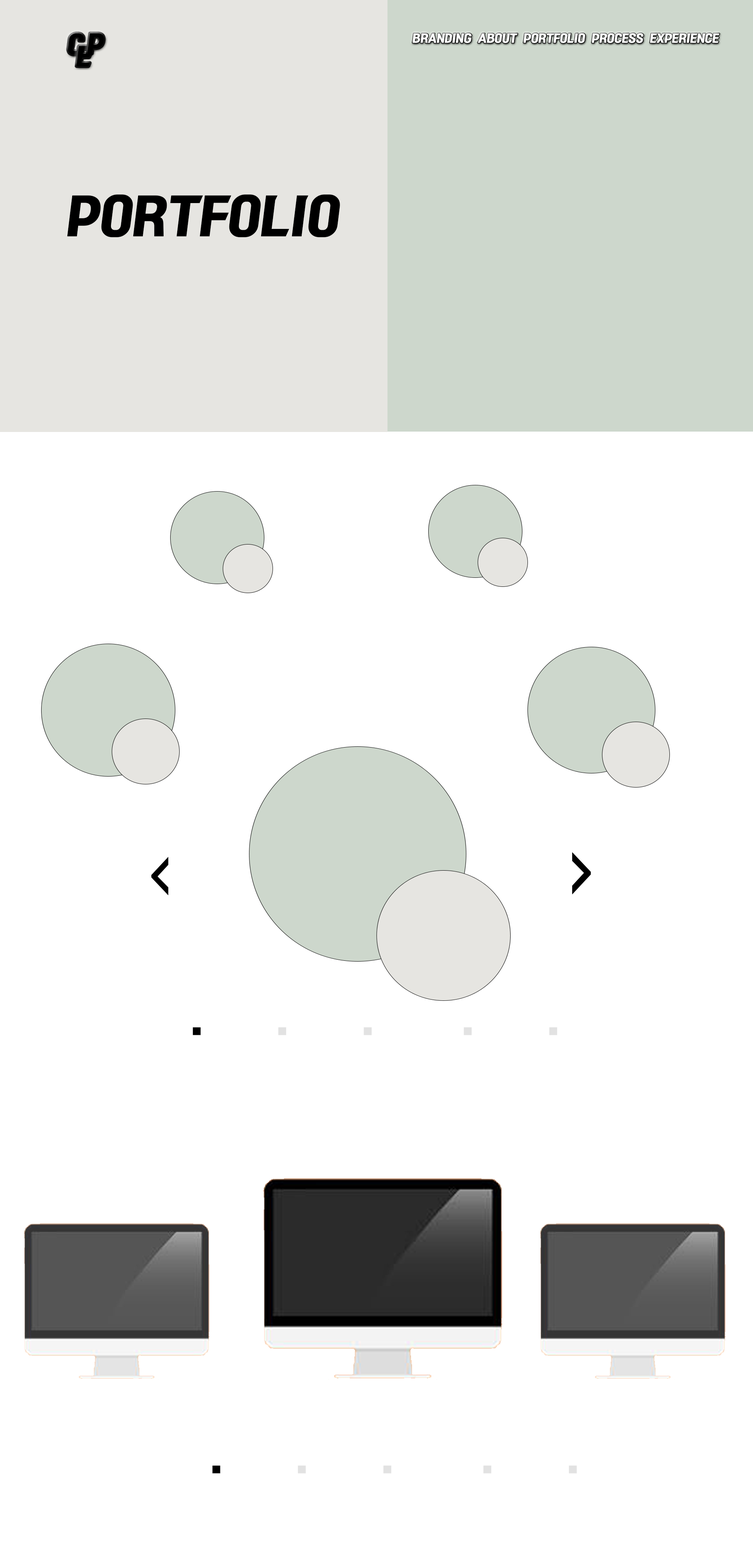
<style>
.page{position:relative;width:753px;height:1568px;background:#ffffff}
.page>*{position:absolute;margin:0}
.t1{font:10.9px "KoreanRKT-R";color:#ffffff}
.t2{font:48.2px "KoreanRKT-R";color:#000000}
.t3{font:43.7px "KoreanSWGI3-R";color:#000000}
.t4{font:48.2px "KoreanSWGI3-R";color:#000000}
.t5{font:48.2px "KoreanSWGI3-R";color:#e2e2e2}
</style>
<div class="page">
<p class="t1" style="left:412px;top:33px;width:307px;height:10px">BRANDING  ABOUT  PORTFOLIO  PROCESS  EXPERIENCE</p>
<p class="t2" style="left:67px;top:194px;width:273px;height:44px">PORTFOLIO</p>
<p class="t3" style="left:151px;top:857px;width:18px;height:39px;rotate:180deg">&gt;</p>
<p class="t4" style="left:572px;top:852px;width:19px;height:43px">&gt;</p>
<p class="t5" style="left:192px;top:1027px;width:365px;height:8px"><span class="t4">.    </span> .     .      .     .</p>
<p class="t5" style="left:212px;top:1465px;width:365px;height:9px"><span class="t4">.    </span> .     .      .     .</p>
</div>
